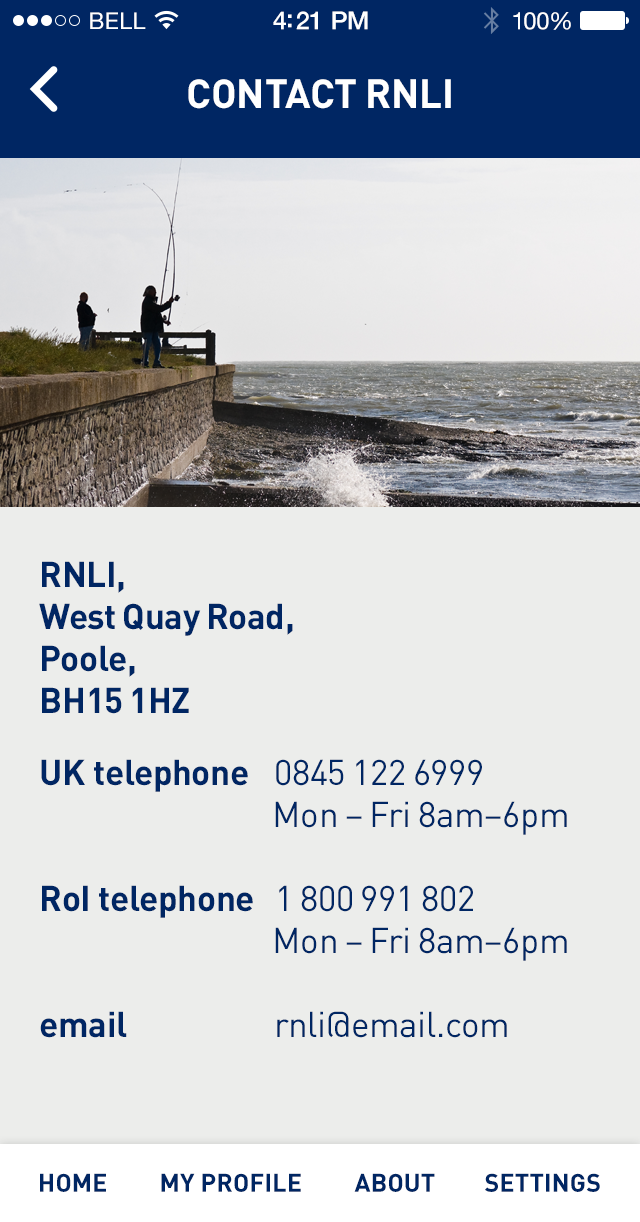
<style>
.page{position:relative;width:640px;height:1222px;background:#ecedeb}
.page>*{position:absolute;margin:0}
.t1{font:23px "HelveticaNeue";letter-spacing:0.02em;color:#ffffff}
.t2{font:25px "HelveticaNeue-Medium";letter-spacing:-0.02em;color:#ffffff}
.t3{font:24px "HelveticaNeue";letter-spacing:-0.02em;color:#ffffff}
.t4{font:40px "DIN-Bold";color:#ffffff;text-transform:uppercase}
.t5{font:35px "DIN-Bold";letter-spacing:-0.01em;color:#002663}
.t6{font:35px "DIN-Regular";letter-spacing:-0.01em;color:#002663}
.t7{font:25px "DIN-Bold";letter-spacing:0.01em;color:#002663;text-transform:uppercase}
</style>
<div class="page">
<p class="t1" style="left:90px;top:12px;width:56px;height:17px">BELL</p>
<p class="t2" style="left:273px;top:11px;width:95px;height:19px">4:21 PM</p>
<p class="t3" style="left:513px;top:12px;width:58px;height:18px">100%</p>
<p class="t4" style="left:188px;top:79px;width:263px;height:30px">Contact RNLI</p>
<p class="t5" style="left:39px;top:561px;width:528px;height:477px">RNLI,<br>West Quay Road,<br>Poole,<br>BH15 1HZ<br>UK telephone<span class="t6"> 0845 122 6999<br>    Mon – Fri 8am–6pm<br><br></span>RoI telephone<span class="t6">  1 800 991 802<br>    Mon – Fri 8am–6pm<br><br></span>email    <span class="t6">rnli@email.com</span></p>
<p class="t7" style="left:40px;top:1173px;width:66px;height:19px">Home</p>
<p class="t7" style="left:161px;top:1173px;width:140px;height:19px">My Profile</p>
<p class="t7" style="left:354px;top:1173px;width:81px;height:19px">About</p>
<p class="t7" style="left:485px;top:1173px;width:115px;height:19px">Settings</p>
</div>
